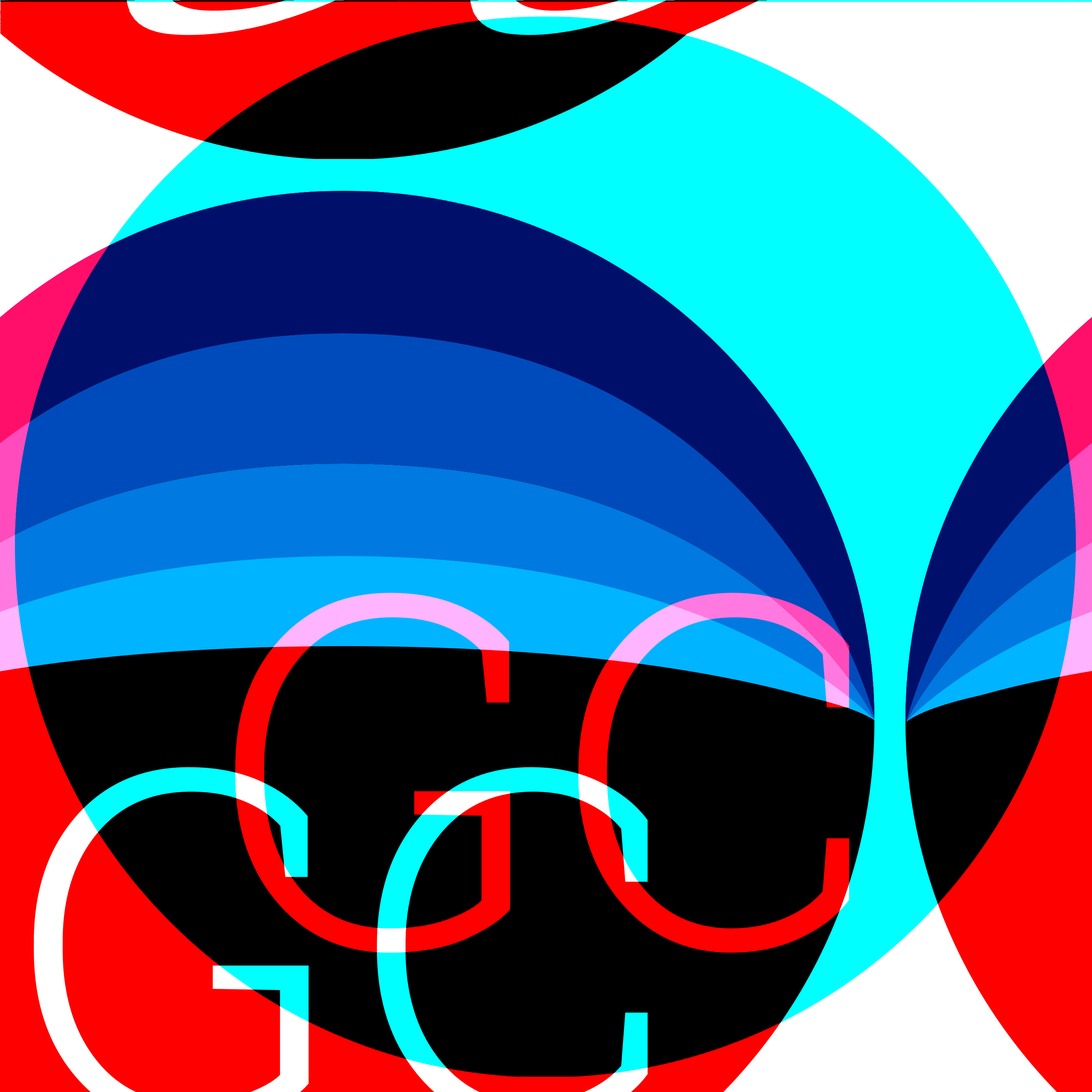
<style>
.page{position:relative;width:1092px;height:1092px;background:#000000}
.page>*{position:absolute;margin:0}
.t1{font:491.9px "RobotoSlab-Light"}
</style>
<div class="page">
<p class="t1" style="left:235px;top:591px;width:614px;height:360px">GC</p>
</div>
